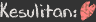
<style>
.page{position:relative;width:96px;height:22px;background:#333333}
.page>*{position:absolute;margin:0}
.t1{font:20px "DJBChalkItUp";color:#d6d2d0}
</style>
<div class="page">
<p class="t1" style="left:0px;top:2px;width:77px;height:16px">Kesulitan:</p>
</div>
